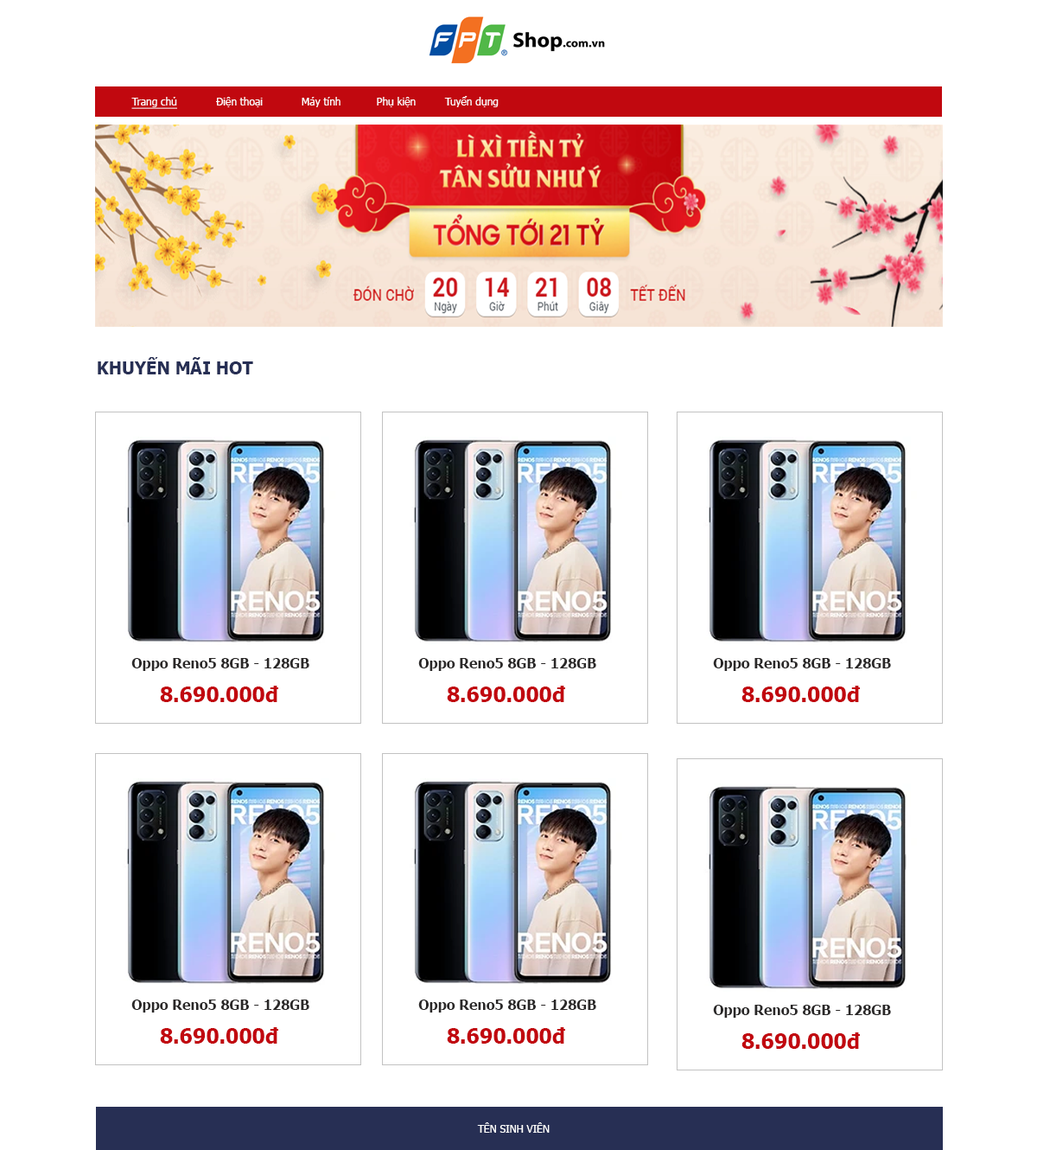
<style>
.page{position:relative;width:1037px;height:1150px;background:#ffffff}
.page>*{position:absolute;margin:0}
.t1{font:10.4px "Tahoma";color:#fefbfb}
.t2{font:10.4px "Tahoma";color:#fefbfb;text-decoration:underline}
.t3{font:17.3px "Tahoma-Bold";color:#272f54}
.t4{font:13.8px "Tahoma-Bold";color:#2a2828}
.t5{font:20.7px "Tahoma-Bold";color:#c1080f}
.t6{font:10.4px "Tahoma";color:#ffffff}
</style>
<div class="page">
<p class="t1" style="left:131px;top:96px;width:368px;height:13px"><span class="t2">Trang chủ</span>            Điện thoại            Máy tính           Phụ kiện         Tuyển dụng</p>
<p class="t3" style="left:98px;top:357px;width:155px;height:17px">KHUYẾN MÃI HOT</p>
<p class="t4" style="left:131px;top:658px;width:178px;height:13px">Oppo Reno5 8GB - 128GB</p>
<p class="t4" style="left:418px;top:658px;width:178px;height:13px">Oppo Reno5 8GB - 128GB</p>
<p class="t4" style="left:713px;top:658px;width:178px;height:13px">Oppo Reno5 8GB - 128GB</p>
<p class="t5" style="left:160px;top:685px;width:118px;height:17px">8.690.000đ</p>
<p class="t5" style="left:447px;top:685px;width:118px;height:17px">8.690.000đ</p>
<p class="t5" style="left:742px;top:685px;width:118px;height:17px">8.690.000đ</p>
<p class="t4" style="left:131px;top:999px;width:178px;height:13px">Oppo Reno5 8GB - 128GB</p>
<p class="t4" style="left:418px;top:999px;width:178px;height:13px">Oppo Reno5 8GB - 128GB</p>
<p class="t4" style="left:713px;top:1004px;width:178px;height:13px">Oppo Reno5 8GB - 128GB</p>
<p class="t5" style="left:160px;top:1027px;width:118px;height:16px">8.690.000đ</p>
<p class="t5" style="left:447px;top:1027px;width:118px;height:16px">8.690.000đ</p>
<p class="t5" style="left:742px;top:1032px;width:118px;height:16px">8.690.000đ</p>
<p class="t6" style="left:477px;top:1122px;width:73px;height:10px">TÊN SINH VIÊN</p>
</div>
